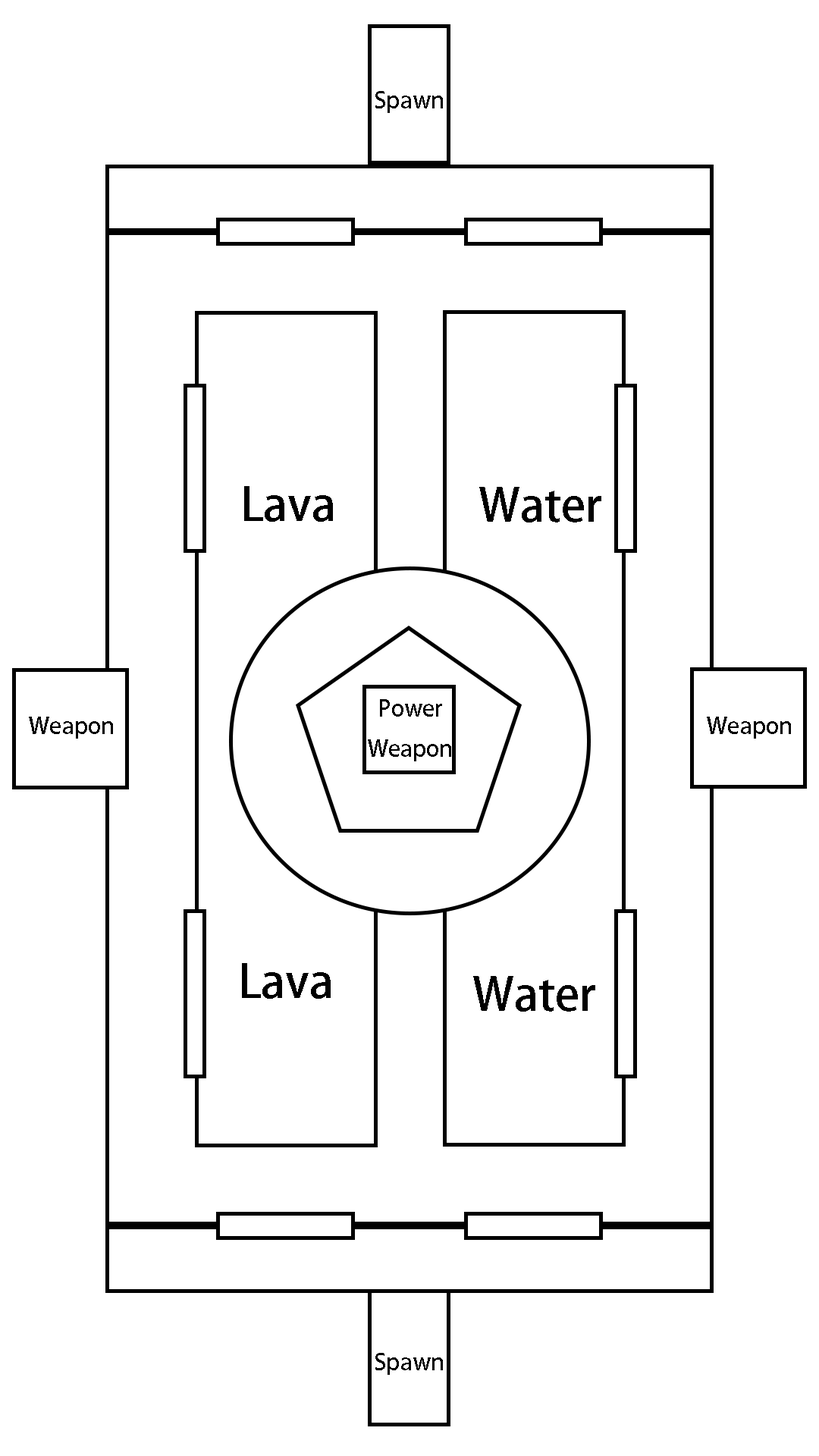
<style>
.page{position:relative;width:819px;height:1456px;background:#ffffff}
.page>*{position:absolute;margin:0}
.t1{font:22.7px "AdobeHeitiStd-Regular";color:#000000}
.t2{font:45.5px "AdobeHeitiStd-Regular";color:#000000}
</style>
<div class="page">
<p class="t1" style="left:375px;top:91px;width:68px;height:22px">Spawn</p>
<p class="t2" style="left:244px;top:486px;width:89px;height:36px">Lava</p>
<p class="t2" style="left:479px;top:487px;width:122px;height:35px">Water</p>
<p class="t1" style="left:368px;top:699px;width:83px;height:62px;text-align:center">Power<br>Weapon</p>
<p class="t1" style="left:29px;top:717px;width:84px;height:22px">Weapon</p>
<p class="t1" style="left:707px;top:717px;width:84px;height:22px">Weapon</p>
<p class="t2" style="left:242px;top:963px;width:89px;height:36px">Lava</p>
<p class="t2" style="left:473px;top:976px;width:122px;height:36px">Water</p>
<p class="t1" style="left:375px;top:1353px;width:68px;height:22px">Spawn</p>
</div>
